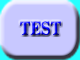
<style>
.page{position:relative;width:80px;height:60px;background:#c8c8ff}
.page>*{position:absolute;margin:0}
.t1{font:18px "MyungjoXB-HM"}
</style>
<div class="page">
<p class="t1" style="left:20px;top:21px;width:41px;height:14px">TEST</p>
</div>
